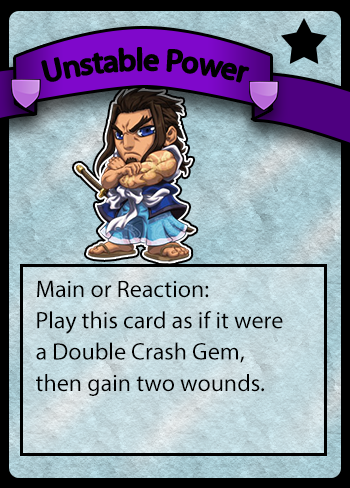
<style>
.page{position:relative;width:350px;height:488px}
.page>*{position:absolute;margin:0}
.t1{font:30px "MyriadPro-Regular";color:#000000}
.t2{font:24px "MyriadPro-Regular";color:#000000}
</style>
<div class="page">
<p class="t1" style="left:42px;top:48px;width:207px;height:34px">Unstable Power</p>
<p class="t2" style="left:36px;top:280px;width:247px;height:116px">Main or Reaction:<br>Play this card as if it were<br>a Double Crash Gem,<br>then gain two wounds.</p>
</div>
